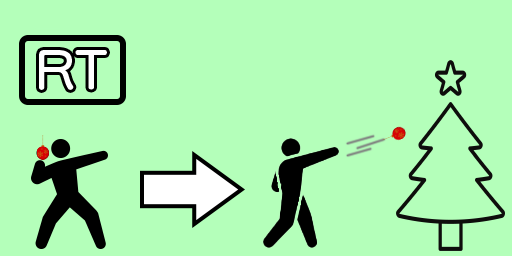
<style>
.page{position:relative;width:512px;height:256px;background:#b4ffba}
.page>*{position:absolute;margin:0}
.t1{font:50px "SeuratProN-DB";color:#ffffff}
</style>
<div class="page">
<p class="t1" style="left:39px;top:50px;width:68px;height:40px">RT</p>
</div>
